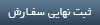
<style>
.page{position:relative;width:100px;height:25px}
.page>*{position:absolute;margin:0}
.t1{font:12px "BYekan";color:#ffffff}
</style>
<div class="page">
<p class="t1" style="left:8px;top:8px;width:84px;height:10px">ثبت نهایی سفـارش</p>
</div>
